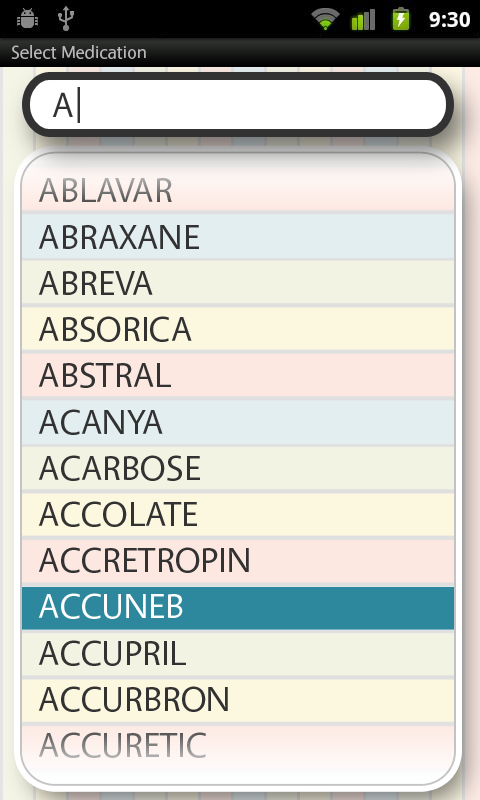
<style>
.page{position:relative;width:480px;height:800px}
.page>*{position:absolute;margin:0}
.t1{font:17.9px "Vegur-Regular";color:#b9b9b9}
.t2{font:35.9px "Vegur-Regular";color:#323232}
.t3{font:35.3px/46.2px "Vegur-Regular";color:#323232}
.t4{font:35.3px/46.2px "Vegur-Regular";color:#fefefe}
</style>
<div class="page">
<p class="t1" style="left:11px;top:45px;width:135px;height:14px">Select Medication</p>
<p class="t2" style="left:77px;top:87px;width:3px;height:36px">|</p>
<p class="t2" style="left:52px;top:92px;width:21px;height:25px">A</p>
<p class="t3" style="left:38px;top:178px;width:211px;height:580px">ABLAVAR<br>ABRAXANE <br>ABREVA<br>ABSORICA<br>ABSTRAL<br>ACANYA<br>ACARBOSE<br>ACCOLATE<br>ACCRETROPIN<br><span class="t4">ACCUNEB<br></span>ACCUPRIL<br>ACCURBRON<br>ACCURETIC</p>
</div>
